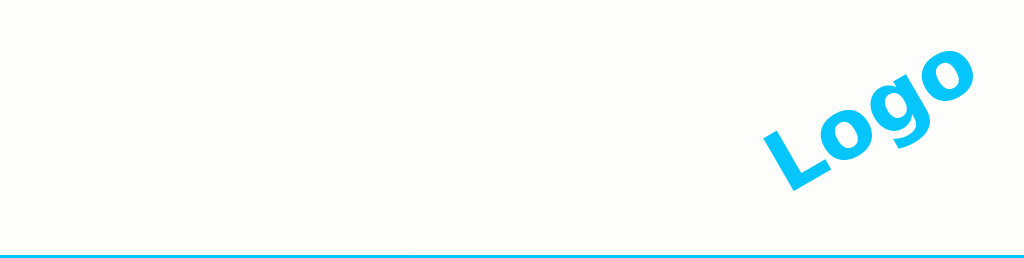
<style>
.page{position:relative;width:1024px;height:258px;background:#fdfdfc}
.page>*{position:absolute;margin:0}
.t1{font:83.3px "DejaVuSans-Bold";color:#04c6fd}
</style>
<div class="page">
<p class="t1" style="left:763px;top:51px;width:210px;height:140px;rotate:-30deg">Logo</p>
</div>
